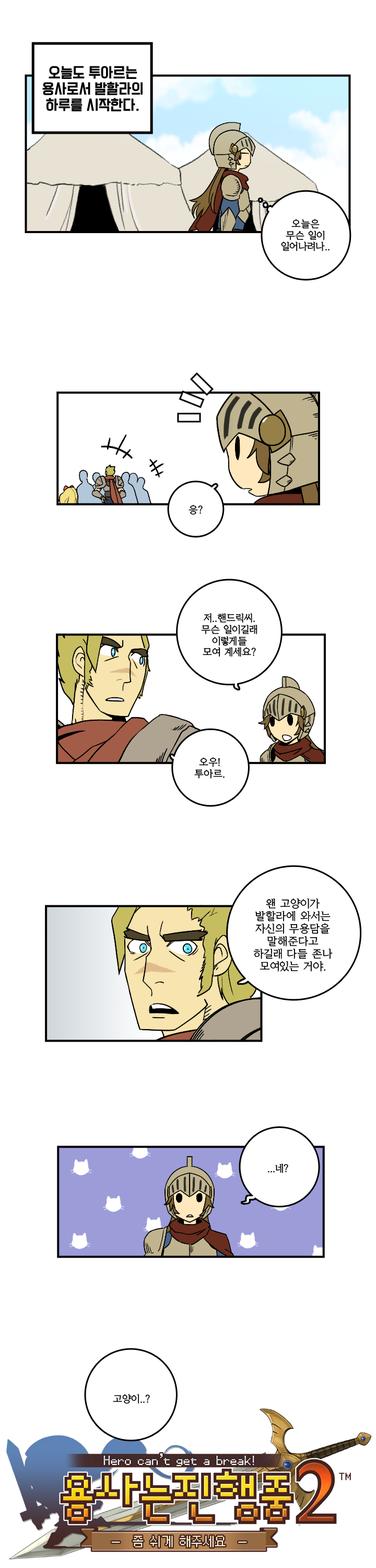
<style>
.page{position:relative;width:376px;height:1568px;background:#ffffff}
.page>*{position:absolute;margin:0}
.t1{font:13.6px "TTComsetakR";color:#000000}
.t2{font:9.4px "KoreanYMJ-B";color:#000000}
.t3{font:10.5px "KoreanYMJ-B";color:#000000}
</style>
<div class="page">
<p class="t1" style="left:42px;top:66px;width:101px;height:45px;text-align:center">오늘도 투아르는<br>용사로서 발할라의<br>하루를 시작한다.</p>
<p class="t2" style="left:281px;top:219px;width:49px;height:32px;text-align:center">오늘은<br>무슨 일이<br>일어나려나..</p>
<p class="t2" style="left:189px;top:505px;width:14px;height:10px">응?</p>
<p class="t2" style="left:201px;top:613px;width:57px;height:44px;text-align:center">저..핸드릭씨.<br>무슨 일이길래<br>이렇게들<br>모여 계세요?</p>
<p class="t2" style="left:194px;top:757px;width:31px;height:22px;text-align:center">오우!<br>투아르.</p>
<p class="t3" style="left:253px;top:898px;width:80px;height:74px;text-align:center">왠 고양이가<br>발할라에 와서는<br>자신의 무용담을<br>말해준다고<br>하길래 다들 존나<br>모여있는 거야.</p>
<p class="t2" style="left:268px;top:1163px;width:21px;height:10px">...네?</p>
<p class="t2" style="left:113px;top:1394px;width:37px;height:10px">고양이..?</p>
</div>
